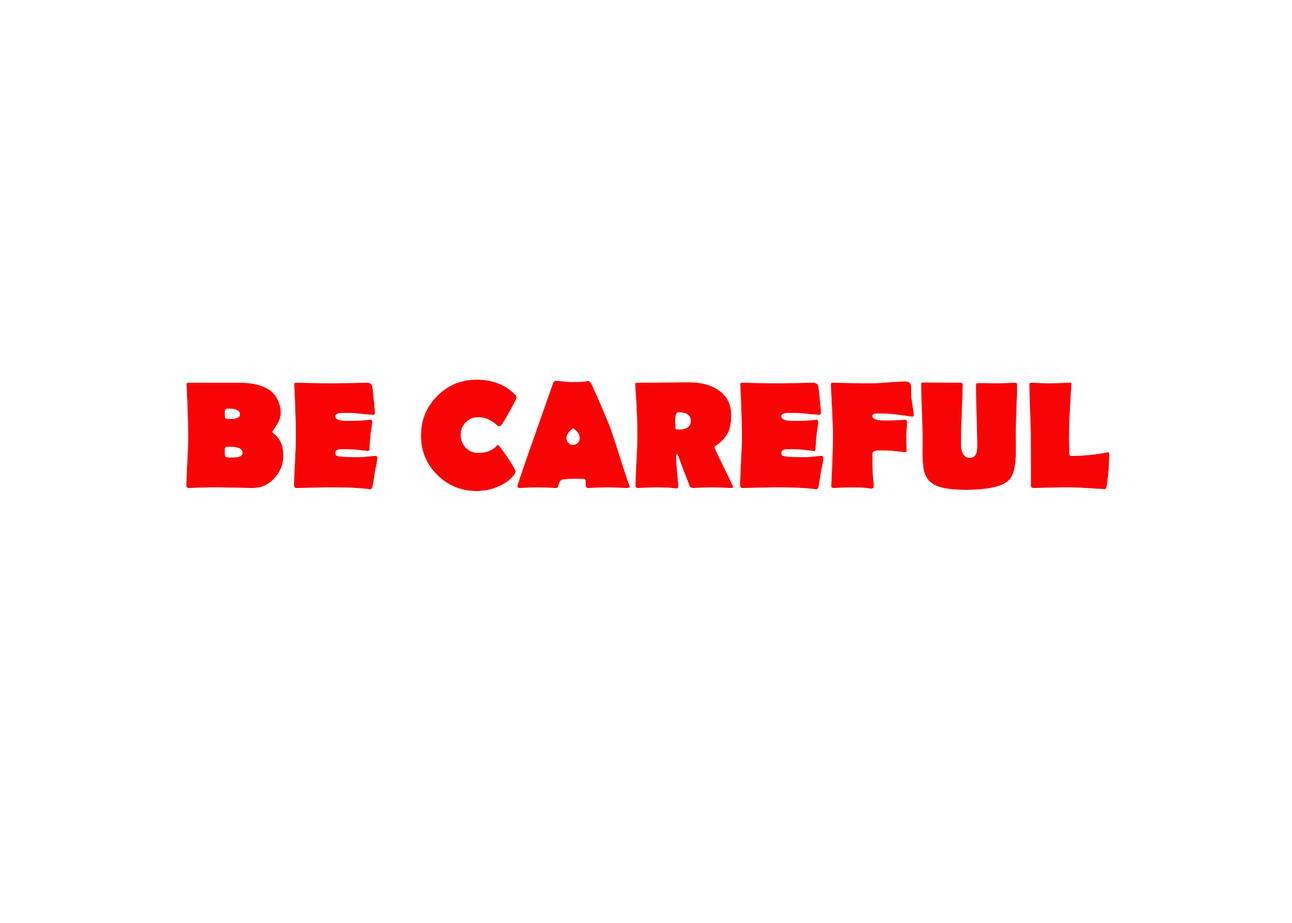
<style>
.page{position:relative;width:1292px;height:923px;background:#ffffff}
.page>*{position:absolute;margin:0}
.t1{font:153.8px "BerlinSansFB-Bold";color:#f70505}
</style>
<div class="page">
<p class="t1" style="left:186px;top:380px;width:923px;height:111px">BE CAREFUL</p>
</div>
